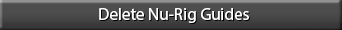
<style>
.page{position:relative;width:342px;height:30px;background:#4d4d4d}
.page>*{position:absolute;margin:0}
.t1{font:17px "MyriadPro-Regular";color:#ffffff}
</style>
<div class="page">
<p class="t1" style="left:99px;top:8px;width:150px;height:15px">Delete Nu-Rig Guides</p>
</div>
